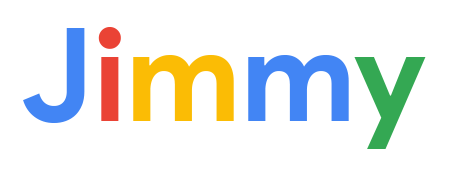
<style>
.page{position:relative;width:450px;height:171px;background:#ffffff}
.page>*{position:absolute;margin:0}
.t1{font:130px "ProductSans-Bold";color:#4285f4}
.t2{font:130px "ProductSans-Bold";color:#ea4335}
.t3{font:130px "ProductSans-Bold";color:#fbbc05}
.t4{font:130px "ProductSans-Bold";color:#34a853}
</style>
<div class="page">
<p class="t1" style="left:23px;top:27px;width:403px;height:122px">J<span class="t2">i</span><span class="t3">m</span>m<span class="t4">y</span></p>
</div>
